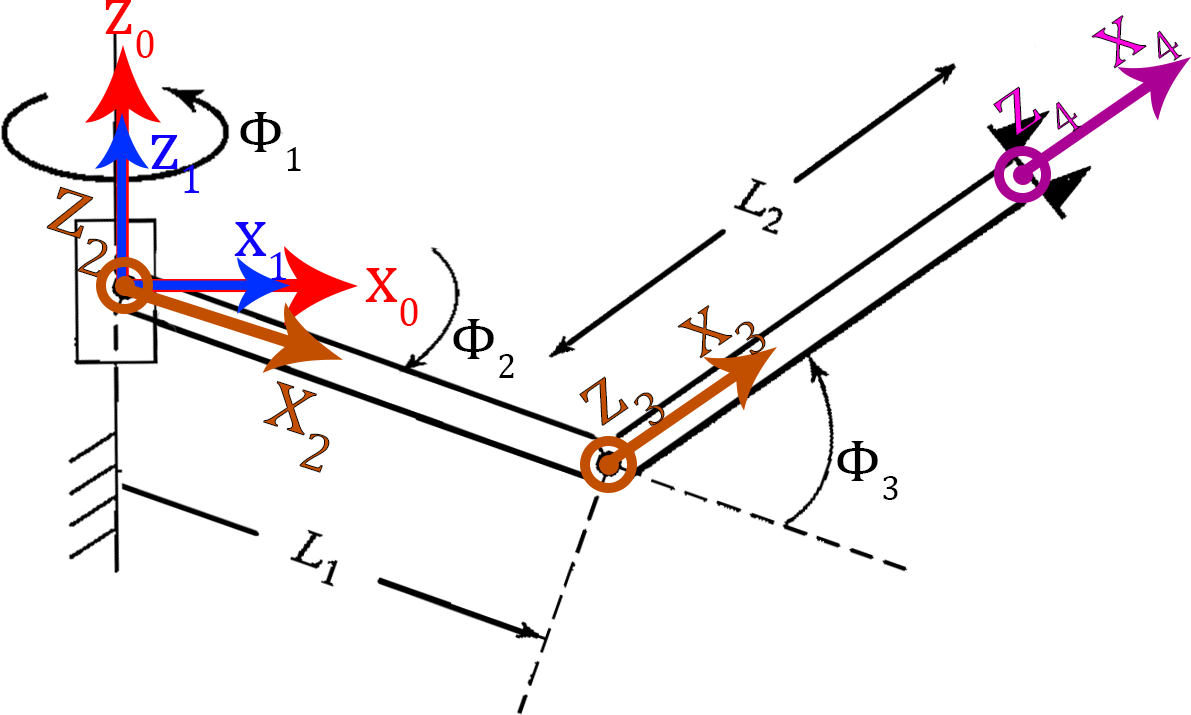
<style>
.page{position:relative;width:1191px;height:715px;background:#ffffff}
.page>*{position:absolute;margin:0}
.t1{font:71.9px "CambriaMath";color:#ff0000;scale:0.95 1}
.t2{font:85px "CambriaMath"}
.t3{font:60px "CambriaMath";color:#000000}
.t4{font:71.9px "CambriaMath";color:#1200ff;scale:0.95 1}
.t5{font:93.9px "CambriaMath"}
</style>
<div class="page">
<p class="t1" style="left:105px;top:0px;width:49px;height:58px">z0</p>
<p class="t2" style="left:1091px;top:15px;width:91px;height:54px;rotate:-35deg">x4</p>
<p class="t2" style="left:993px;top:86px;width:88px;height:50px;rotate:-35deg">z4</p>
<p class="t3" style="left:240px;top:112px;width:61px;height:59px">Φ1</p>
<p class="t4" style="left:151px;top:135px;width:48px;height:58px">z1</p>
<p class="t5" style="left:46px;top:186px;width:62px;height:92px;rotate:18deg">z2</p>
<p class="t4" style="left:234px;top:222px;width:52px;height:58px">x1</p>
<p class="t1" style="left:365px;top:268px;width:53px;height:58px">x0</p>
<p class="t2" style="left:677px;top:305px;width:89px;height:54px;rotate:-35deg">x3</p>
<p class="t3" style="left:453px;top:319px;width:61px;height:59px">Φ2</p>
<p class="t2" style="left:579px;top:376px;width:86px;height:50px;rotate:-35deg">z3</p>
<p class="t5" style="left:263px;top:381px;width:67px;height:92px;rotate:18deg">x2</p>
<p class="t3" style="left:837px;top:441px;width:61px;height:59px">Φ3</p>
</div>
